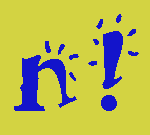
<style>
.page{position:relative;width:150px;height:135px;background:#d3d342}
.page>*{position:absolute;margin:0}
.t1{font:120px "ARHERMANN";color:#1314cb}
</style>
<div class="page">
<p class="t1" style="left:14px;top:14px;width:125px;height:97px">n!</p>
</div>
